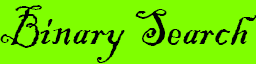
<style>
.page{position:relative;width:256px;height:64px;background:#7fff00}
.page>*{position:absolute;margin:0}
.t1{font:52.3px "BlackadderITC-Regular";color:#010101;scale:0.93 1}
</style>
<div class="page">
<p class="t1" style="left:0px;top:5px;width:257px;height:58px">Binary Search</p>
</div>
